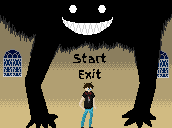
<style>
.page{position:relative;width:172px;height:128px;background:#000000}
.page>*{position:absolute;margin:0}
.t1{font:12px "FingerPaint-Regular";color:#000000}
.t2{font:12px "FingerPaint-Regular";color:#b19f72}
</style>
<div class="page">
<p class="t1" style="left:73px;top:53px;width:34px;height:11px">Start</p>
<p class="t1" style="left:78px;top:68px;width:23px;height:12px"><span class="t2">E</span>xit</p>
</div>
